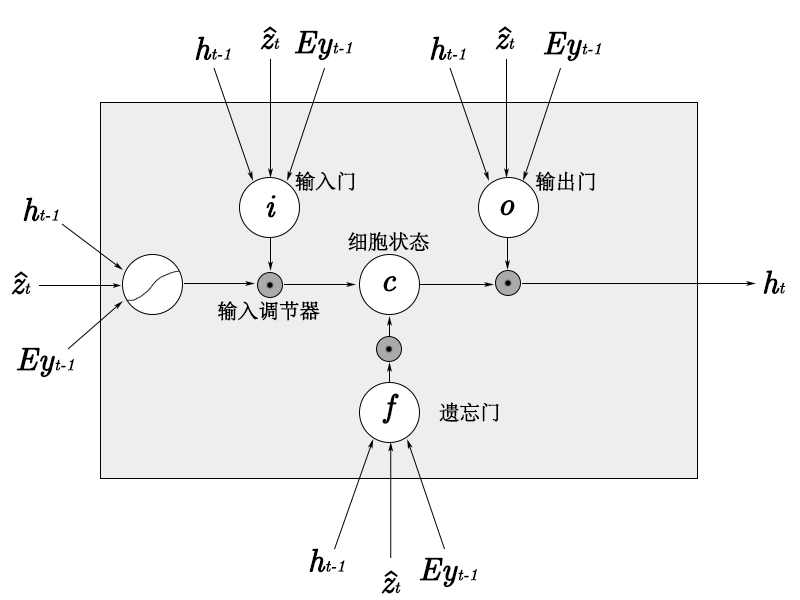
<style>
.page{position:relative;width:800px;height:600px;background:#ffffff}
.page>*{position:absolute;margin:0}
.t1{font:32px "Euclid";color:#000000;font-weight:bold}
.t2{font:16px "Euclid-Italic";color:#000000;font-weight:bold}
.t3{font:32px "Euclid-Italic";color:#000000;font-weight:bold}
.t4{font:20px "STSong";color:#000000;font-weight:bold}
</style>
<div class="page">
<p class="t1" style="left:263px;top:26px;width:14px;height:7px">^</p>
<p class="t2" style="left:294px;top:30px;width:58px;height:31px"><span class="t3">Ey</span>t-1</p>
<p class="t1" style="left:498px;top:26px;width:14px;height:7px">^</p>
<p class="t2" style="left:195px;top:36px;width:36px;height:25px"><span class="t3">h</span>t-1</p>
<p class="t3" style="left:260px;top:33px;width:20px;height:17px">z<span class="t2">t</span></p>
<p class="t2" style="left:430px;top:36px;width:36px;height:25px"><span class="t3">h</span>t-1</p>
<p class="t3" style="left:495px;top:33px;width:20px;height:17px">z<span class="t2">t</span></p>
<p class="t2" style="left:543px;top:31px;width:58px;height:31px"><span class="t3">Ey</span>t-1</p>
<p class="t4" style="left:295px;top:171px;width:60px;height:20px">输入门</p>
<p class="t4" style="left:535px;top:171px;width:60px;height:21px">输出门</p>
<p class="t2" style="left:23px;top:197px;width:36px;height:25px"><span class="t3">h</span>t-1</p>
<p class="t3" style="left:266px;top:195px;width:10px;height:23px">i</p>
<p class="t3" style="left:500px;top:200px;width:15px;height:16px">o</p>
<p class="t4" style="left:348px;top:231px;width:81px;height:21px">细胞状态</p>
<p class="t3" style="left:763px;top:270px;width:22px;height:24px">h<span class="t2">t</span></p>
<p class="t3" style="left:11px;top:278px;width:20px;height:17px">z<span class="t2">t</span></p>
<p class="t1" style="left:14px;top:271px;width:14px;height:7px">^</p>
<p class="t3" style="left:383px;top:276px;width:14px;height:16px">c</p>
<p class="t4" style="left:217px;top:301px;width:103px;height:20px">输入调节器</p>
<p class="t2" style="left:16px;top:347px;width:58px;height:31px"><span class="t3">Ey</span>t-1</p>
<p class="t3" style="left:382px;top:393px;width:17px;height:31px">f</p>
<p class="t4" style="left:439px;top:402px;width:60px;height:20px">遗忘门</p>
<p class="t2" style="left:309px;top:548px;width:36px;height:25px"><span class="t3">h</span>t-1</p>
<p class="t2" style="left:419px;top:557px;width:58px;height:31px"><span class="t3">Ey</span>t-1</p>
<p class="t3" style="left:381px;top:577px;width:20px;height:17px">z<span class="t2">t</span></p>
<p class="t1" style="left:384px;top:570px;width:14px;height:7px">^</p>
</div>
